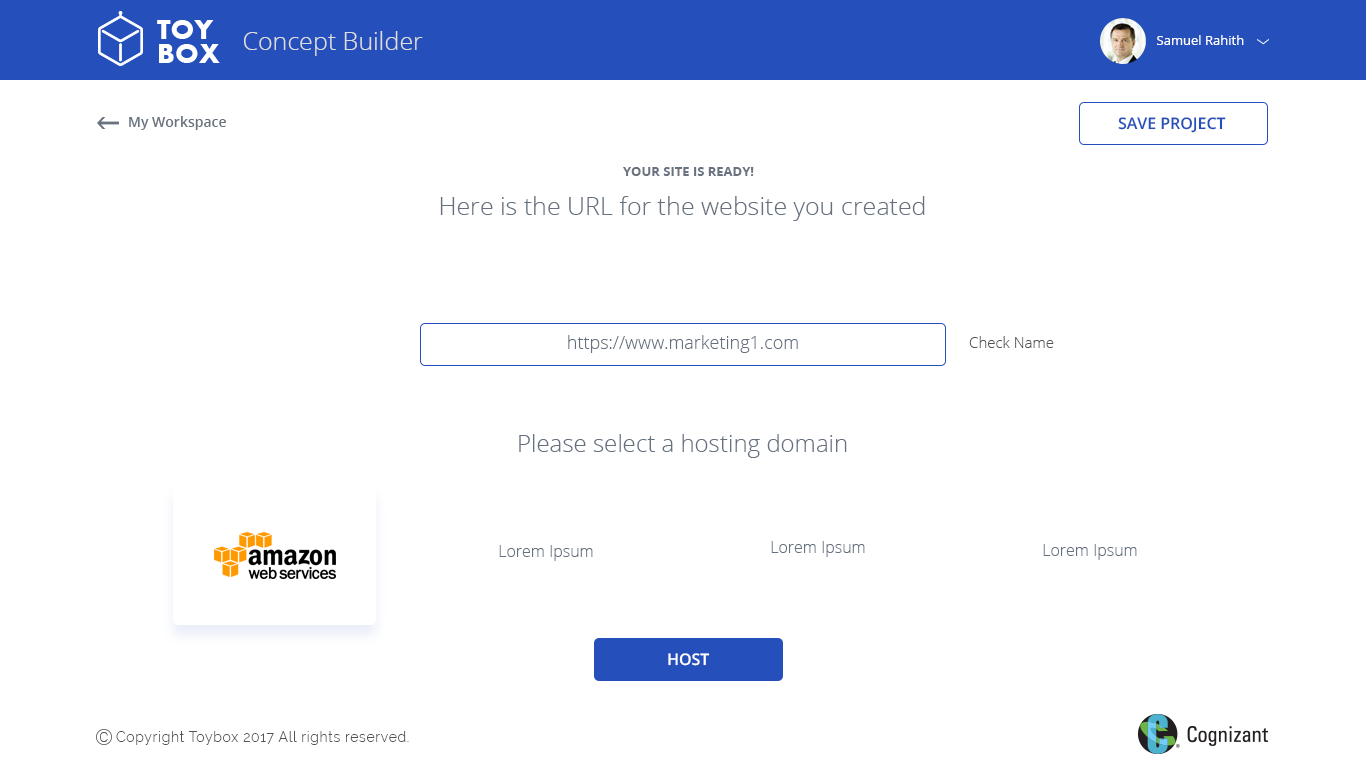
<style>
.page{position:relative;width:1366px;height:768px;background:#ffffff}
.page>*{position:absolute;margin:0}
.t1{font:25px "OpenSans-Light";color:#dedede}
.t2{font:13px "OpenSans";color:#ffffff}
.t3{font:14px "OpenSans-Semibold";color:#69727f}
.t4{font:16px "OpenSans-Semibold";color:#2550bc}
.t5{font:13px "OpenSans-Bold";color:#69727f;text-transform:uppercase}
.t6{font:25px "OpenSans-Light";color:#667180}
.t7{font:18px "OpenSans-Light";color:#667180}
.t8{font:15px "OpenSans-Light";color:#545454}
.t9{font:24px "OpenSans-Light";color:#667180}
.t10{font:16px "OpenSans-Light";color:#667180}
.t11{font:16px "OpenSans-Semibold";color:#ffffff}
.t12{font:18.2px "Roboto-Thin";color:#545454}
.t13{font:14px "Raleway-Light";letter-spacing:0.05em;color:#545454}
</style>
<div class="page">
<p class="t1" style="left:244px;top:31px;width:179px;height:25px">Concept Builder</p>
<p class="t2" style="left:1157px;top:35px;width:87px;height:10px">Samuel Rahith</p>
<p class="t3" style="left:129px;top:116px;width:97px;height:14px">My Workspace</p>
<p class="t4" style="left:1118px;top:117px;width:108px;height:16px">SAVE PROJECT</p>
<p class="t5" style="left:623px;top:167px;width:131px;height:9px">Your site is ready!</p>
<p class="t6" style="left:440px;top:196px;width:485px;height:25px">Here is the URL for the website you created</p>
<p class="t7" style="left:568px;top:335px;width:230px;height:18px">https://www.marketing1.com</p>
<p class="t8" style="left:969px;top:336px;width:85px;height:12px">Check Name</p>
<p class="t9" style="left:519px;top:434px;width:328px;height:24px">Please select a hosting domain</p>
<p class="t10" style="left:499px;top:545px;width:94px;height:16px">Lorem Ipsum</p>
<p class="t10" style="left:771px;top:541px;width:94px;height:16px">Lorem Ipsum</p>
<p class="t10" style="left:1043px;top:544px;width:94px;height:16px">Lorem Ipsum</p>
<p class="t11" style="left:668px;top:653px;width:42px;height:13px">HOST</p>
<p class="t12" style="left:100px;top:732px;width:8px;height:10px">c</p>
<p class="t13" style="left:116px;top:731px;width:293px;height:14px">Copyright Toybox 2017 All rights reserved.</p>
</div>
